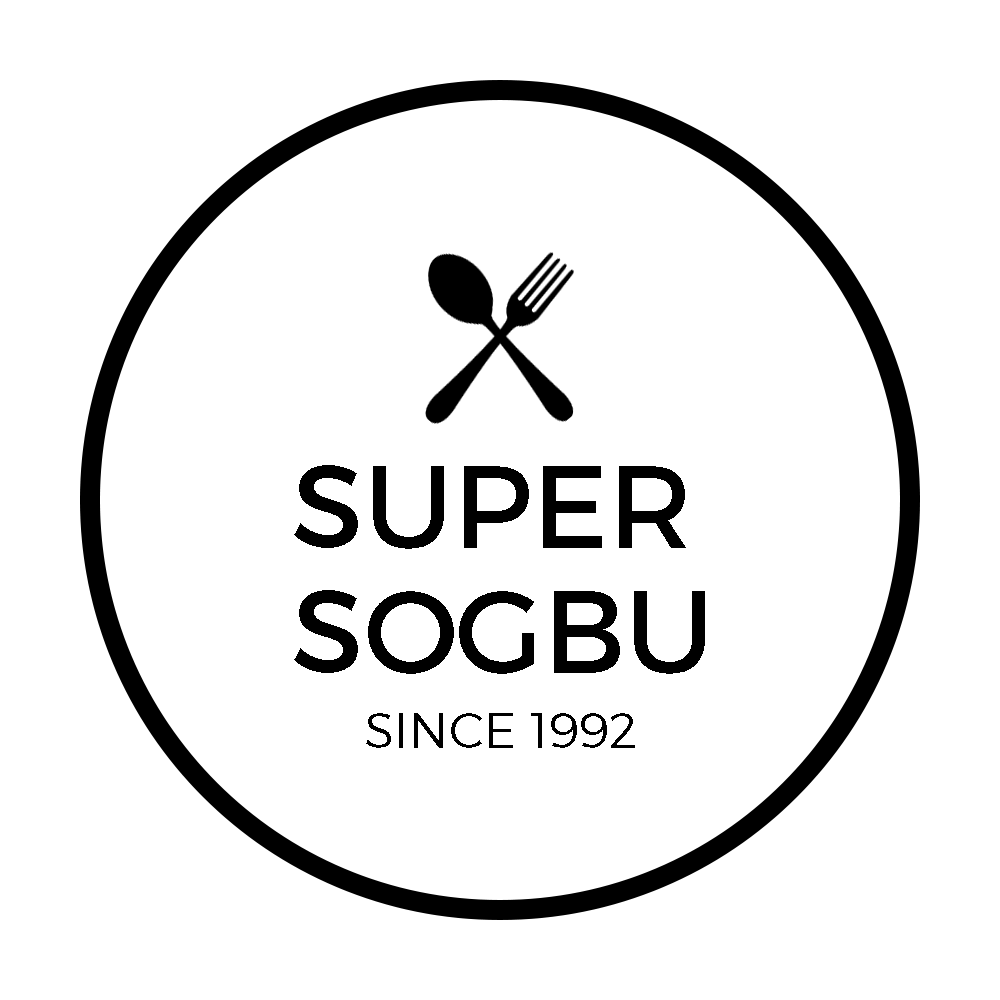
<style>
.page{position:relative;width:1000px;height:1000px;background:#ffffff}
.page>*{position:absolute;margin:0}
.t1{font:116.7px/125px "Montserrat-Regular";color:#000000}
.t2{font:50px "Montserrat-Light";color:#000000}
</style>
<div class="page">
<p class="t1" style="left:294px;top:465px;width:411px;height:209px">SUPER<br>SOGBU</p>
<p class="t2" style="left:366px;top:713px;width:269px;height:35px">SINCE 1992</p>
</div>
